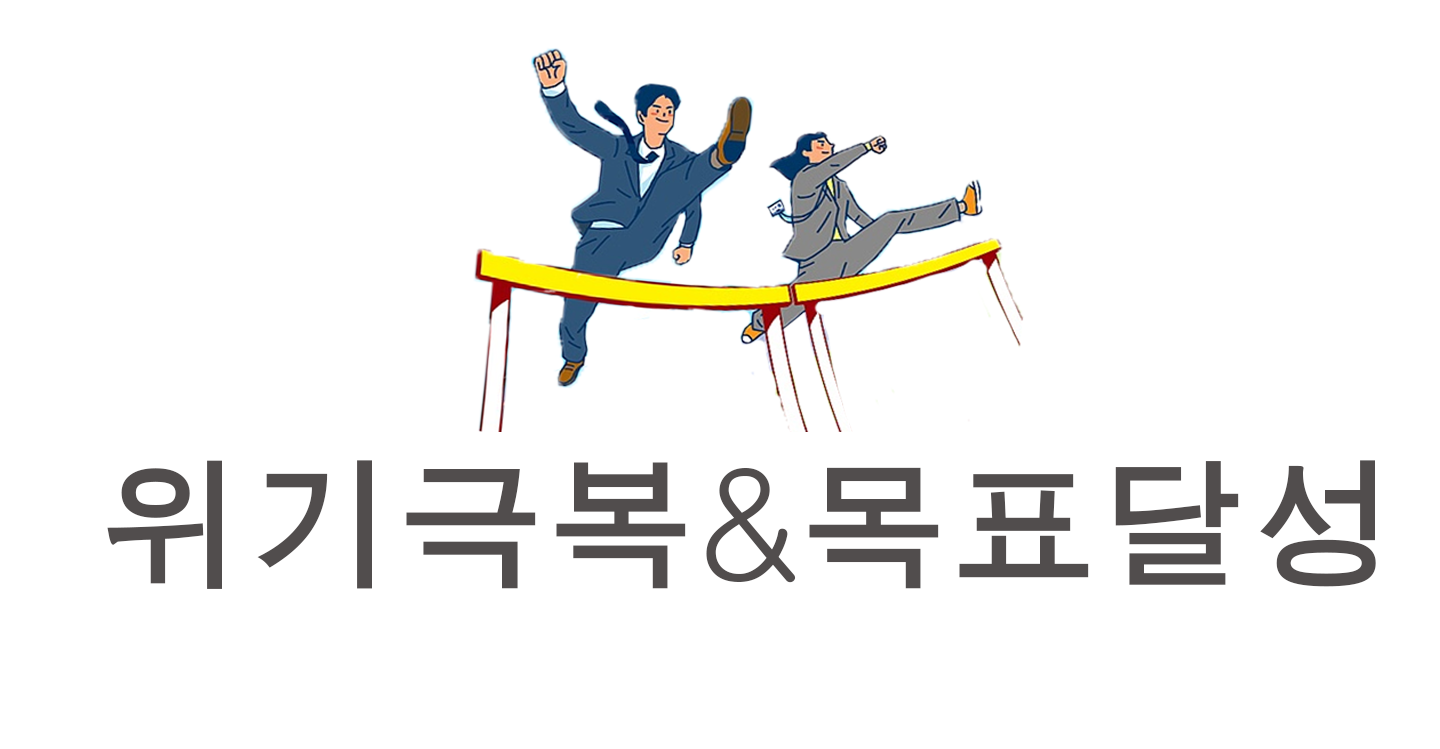
<style>
.page{position:relative;width:1440px;height:749px;background:#ffffff}
.page>*{position:absolute;margin:0}
.t1{font:150px "MJemokGothic";color:#514d4d}
.t2{font:150px "Gulim";color:#514d4d}
</style>
<div class="page">
<p class="t1" style="left:107px;top:460px;width:1269px;height:129px">위기극복<span class="t2">&amp;</span>목표달성</p>
</div>
